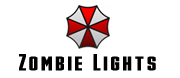
<style>
.page{position:relative;width:180px;height:78px;background:#ffffff}
.page>*{position:absolute;margin:0}
.t1{font:24px "Stark";letter-spacing:0.05em;color:#000000}
</style>
<div class="page">
<p class="t1" style="left:19px;top:54px;width:137px;height:17px">Zombie Lights</p>
</div>
